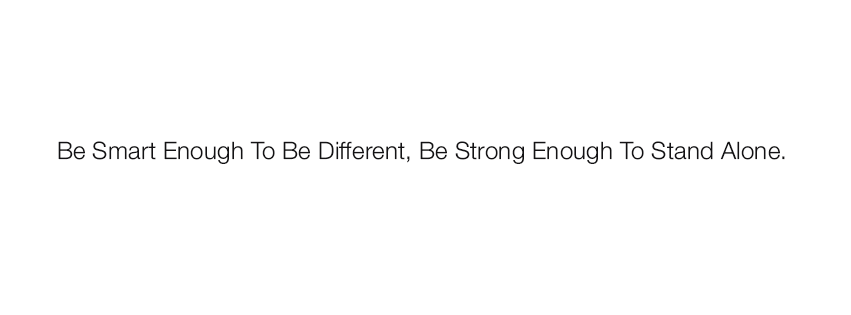
<style>
.page{position:relative;width:851px;height:315px;background:#ffffff}
.page>*{position:absolute;margin:0}
.t1{font:24px "HelveticaNeue-Light";letter-spacing:0.01em;color:#131214}
</style>
<div class="page">
<p class="t1" style="left:58px;top:141px;width:727px;height:23px">Be Smart Enough To Be Different, Be Strong Enough To Stand Alone.</p>
</div>
